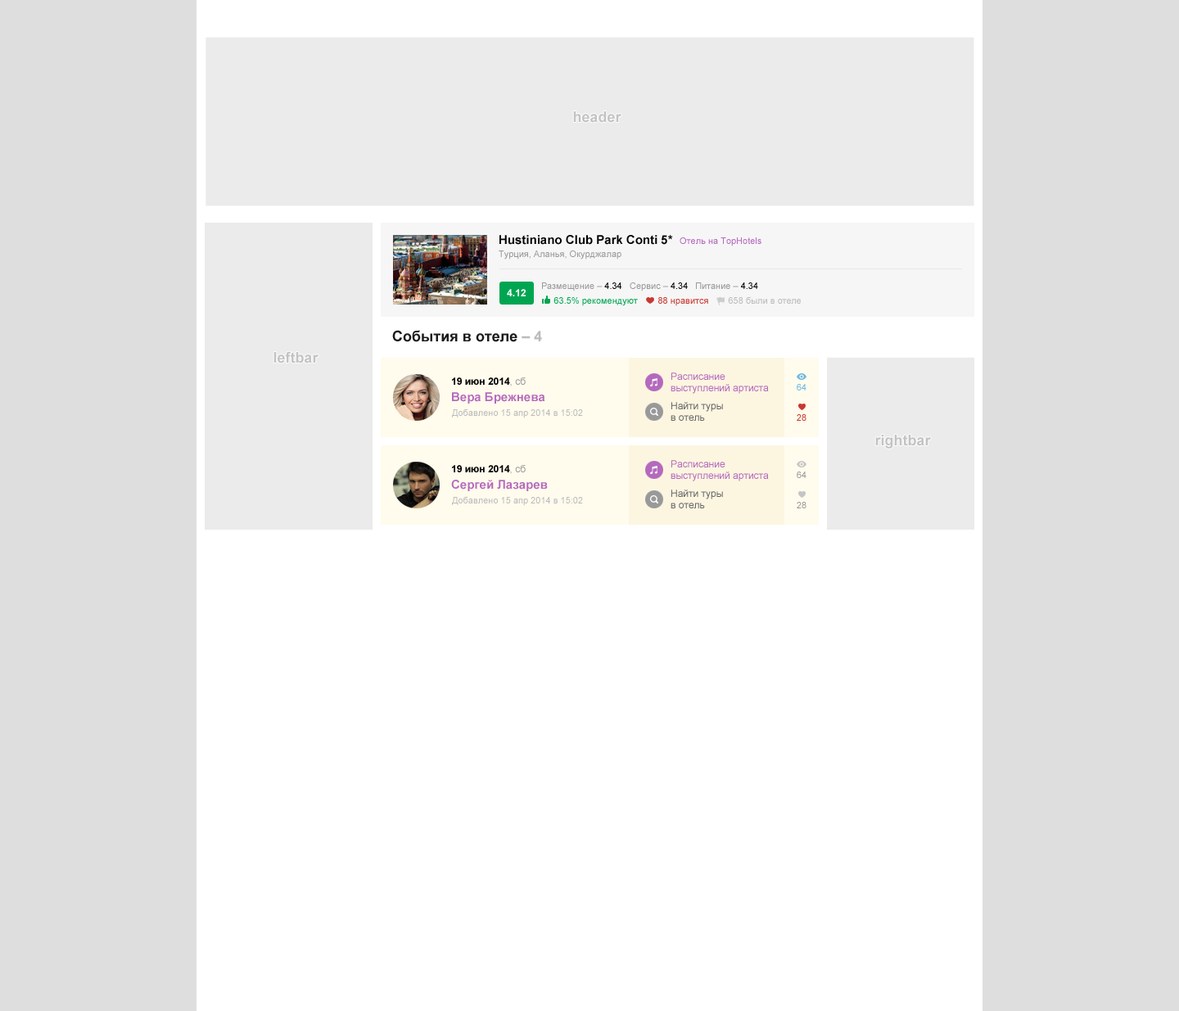
<style>
.page{position:relative;width:1179px;height:1011px;background:#ffffff}
.page>*{position:absolute;margin:0}
.t1{font:12.3px "Arial-BoldMT";color:#000000}
.t2{font:9px "ArialMT";color:#b469bd}
.t3{font:9px "ArialMT";color:#999999}
.t4{font:9.8px "Arial-BoldMT";color:#ffffff}
.t5{font:9px "ArialMT";color:#000001}
.t6{font:9px "ArialMT";color:#000000}
.t7{font:9px "ArialMT";color:#00a551}
.t8{font:9px "ArialMT";color:#c83831}
.t9{font:9px "ArialMT";color:#bbbbbb}
.t10{font:14.7px "Arial-BoldMT";color:#1b1b1b}
.t11{font:14.7px "Arial-BoldMT";color:#bbbbbb}
.t12{font:9.8px "Arial-BoldMT";color:#000000}
.t13{font:9.8px "ArialMT";color:#999999}
.t14{font:9.8px "ArialMT";color:#b469bd}
.t15{font:9px "ArialMT";color:#6bb7e3}
.t16{font:12.3px "Arial-BoldMT";color:#b469bd}
.t17{font:9.8px "ArialMT";color:#666666}
</style>
<div class="page">
<p class="t1" style="left:499px;top:235px;width:174px;height:10px">Hustiniano Club Park Conti 5*</p>
<p class="t2" style="left:680px;top:237px;width:82px;height:9px">Отель на TopHotels</p>
<p class="t3" style="left:499px;top:251px;width:123px;height:9px">Турция, Аланья, Окурджалар</p>
<p class="t4" style="left:507px;top:289px;width:19px;height:7px">4.12</p>
<p class="t3" style="left:542px;top:283px;width:80px;height:9px">Размещение –<span class="t5"> 4.34</span></p>
<p class="t3" style="left:630px;top:283px;width:58px;height:9px">Сервис – <span class="t6">4.34</span></p>
<p class="t3" style="left:696px;top:283px;width:62px;height:6px">Питание – <span class="t6">4.34</span></p>
<p class="t7" style="left:554px;top:297px;width:84px;height:9px">63.5% рекомендуют</p>
<p class="t8" style="left:658px;top:297px;width:50px;height:9px">88 нравится</p>
<p class="t9" style="left:728px;top:296px;width:73px;height:8px">658 были в отеле</p>
<p class="t10" style="left:392px;top:330px;width:150px;height:12px">Cобытия в отеле<span class="t11"> – 4</span></p>
<p class="t12" style="left:452px;top:377px;width:74px;height:9px">19 июн 2014<span class="t13">, сб</span></p>
<p class="t14" style="left:671px;top:373px;width:98px;height:21px">Расписание<br>выступлений артиста</p>
<p class="t15" style="left:797px;top:384px;width:10px;height:7px">64</p>
<p class="t16" style="left:452px;top:392px;width:93px;height:12px">Вера Брежнева</p>
<p class="t9" style="left:452px;top:409px;width:131px;height:9px">Добавлено 15 апр 2014 в 15:02</p>
<p class="t17" style="left:671px;top:402px;width:52px;height:19px">Найти туры<br>в отель</p>
<p class="t8" style="left:797px;top:414px;width:10px;height:7px">28</p>
<p class="t14" style="left:671px;top:460px;width:98px;height:21px">Расписание<br>выступлений артиста</p>
<p class="t12" style="left:452px;top:465px;width:74px;height:9px">19 июн 2014<span class="t13">, сб</span></p>
<p class="t3" style="left:797px;top:472px;width:10px;height:6px">64</p>
<p class="t16" style="left:451px;top:480px;width:97px;height:11px">Сергей Лазарев</p>
<p class="t9" style="left:452px;top:496px;width:131px;height:10px">Добавлено 15 апр 2014 в 15:02</p>
<p class="t17" style="left:671px;top:490px;width:52px;height:19px">Найти туры<br>в отель</p>
<p class="t3" style="left:797px;top:502px;width:10px;height:7px">28</p>
</div>
